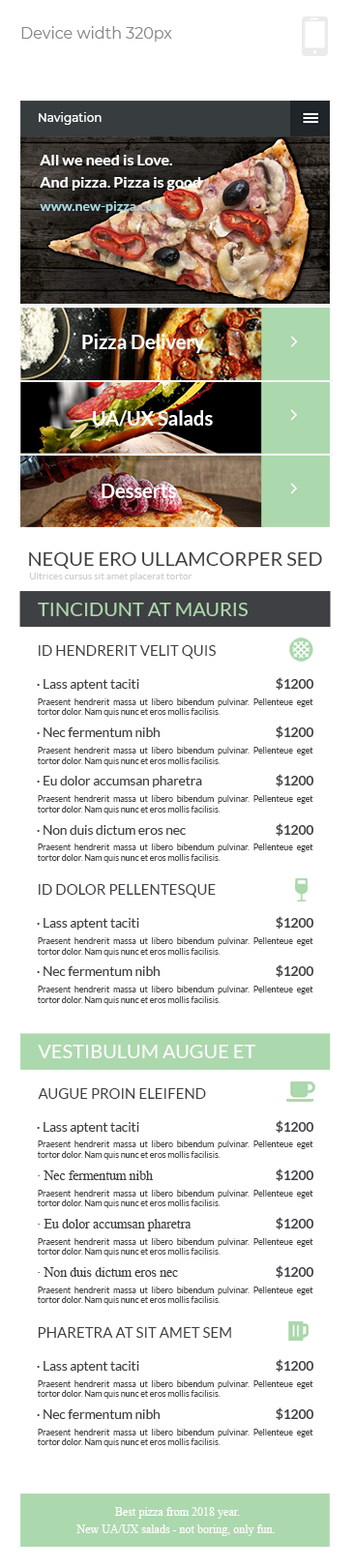
<style>
.page{position:relative;width:354px;height:1568px;background:#ffffff}
.page>*{position:absolute;margin:0}
.t1{font:15.5px "Montserrat-Regular";color:#878787}
.t2{font:11.6px "Montserrat-Medium";color:#ffffff}
.t3{font:15.5px/19.3px "Lato-Bold";color:#ffffff}
.t4{font:13.5px "Lato-Bold";color:#a6d6e0}
.t5{font:19.3px "Lato-Bold";color:#ffffff}
.t6{font:19.4px "Lato-Regular";color:#3f4043;text-transform:uppercase}
.t7{font:9.7px "Lato-Regular";color:#cbccce}
.t8{font:19.4px "Lato-Regular";color:#acd8ad;text-transform:uppercase}
.t9{font:14.6px "Lato-Regular";color:#3f4043;text-transform:uppercase}
.t10{font:13.1px "Lato-Bold";color:#3f4043}
.t11{font:13.1px "Lato-Regular";color:#3f4043}
.t12{font:8.5px "Lato-Regular";color:#3f4043}
.t13{font:19.4px "Lato-Regular";color:#ffffff;text-transform:uppercase}
.t14{font:13.1px "TimesNewRomanPSMT";color:#3f4043}
.t15{font:11.6px/15.5px "TimesNewRomanPSMT";color:#ffffff}
</style>
<div class="page">
<p class="t1" style="left:21px;top:26px;width:151px;height:16px">Device width 320px</p>
<p class="t2" style="left:39px;top:112px;width:63px;height:13px">Navigation</p>
<p class="t3" style="left:40px;top:155px;width:161px;height:36px">All we need is Love.<br>And pizza. Pizza is good</p>
<p class="t4" style="left:40px;top:201px;width:125px;height:12px">www.new-pizza.com</p>
<p class="t5" style="left:82px;top:334px;width:123px;height:19px">Pizza Delivery</p>
<p class="t5" style="left:93px;top:410px;width:120px;height:17px">UA/UX Salads</p>
<p class="t5" style="left:102px;top:484px;width:74px;height:14px">Desserts</p>
<p class="t6" style="left:29px;top:552px;width:293px;height:17px">neque ero ullamcorper sed</p>
<p class="t7" style="left:29px;top:573px;width:163px;height:8px">Ultrices cursus sit amet placerat tortor</p>
<p class="t8" style="left:38px;top:603px;width:210px;height:13px">tincidunt at Mauris</p>
<p class="t9" style="left:39px;top:645px;width:177px;height:14px">id hendrerit velit quis</p>
<p class="t10" style="left:276px;top:677px;width:38px;height:13px">$1200</p>
<p class="t11" style="left:37px;top:679px;width:102px;height:12px">· Lass aptent taciti</p>
<p class="t12" style="left:37px;top:698px;width:276px;height:19px;text-align:justify">Praesent hendrerit massa ut libero bibendum pulvinar. Pellenteue eget tortor dolor. Nam quis nunc et eros mollis facilisis.</p>
<p class="t10" style="left:276px;top:725px;width:38px;height:13px">$1200</p>
<p class="t11" style="left:37px;top:727px;width:123px;height:10px">· Nec fermentum nibh</p>
<p class="t12" style="left:37px;top:747px;width:276px;height:19px;text-align:justify">Praesent hendrerit massa ut libero bibendum pulvinar. Pellenteue eget tortor dolor. Nam quis nunc et eros mollis facilisis.</p>
<p class="t10" style="left:276px;top:774px;width:38px;height:12px">$1200</p>
<p class="t11" style="left:37px;top:776px;width:165px;height:11px">· Eu dolor accumsan pharetra</p>
<p class="t12" style="left:37px;top:795px;width:276px;height:19px;text-align:justify">Praesent hendrerit massa ut libero bibendum pulvinar. Pellenteue eget tortor dolor. Nam quis nunc et eros mollis facilisis.</p>
<p class="t11" style="left:37px;top:825px;width:149px;height:10px">· Non duis dictum eros nec</p>
<p class="t10" style="left:276px;top:823px;width:38px;height:13px">$1200</p>
<p class="t12" style="left:37px;top:843px;width:276px;height:20px;text-align:justify">Praesent hendrerit massa ut libero bibendum pulvinar. Pellenteue eget tortor dolor. Nam quis nunc et eros mollis facilisis.</p>
<p class="t9" style="left:39px;top:884px;width:177px;height:14px">id dolor Pellentesque</p>
<p class="t11" style="left:37px;top:918px;width:102px;height:12px">· Lass aptent taciti</p>
<p class="t10" style="left:276px;top:916px;width:38px;height:13px">$1200</p>
<p class="t12" style="left:37px;top:937px;width:276px;height:20px;text-align:justify">Praesent hendrerit massa ut libero bibendum pulvinar. Pellenteue eget tortor dolor. Nam quis nunc et eros mollis facilisis.</p>
<p class="t10" style="left:276px;top:964px;width:38px;height:13px">$1200</p>
<p class="t11" style="left:37px;top:966px;width:123px;height:10px">· Nec fermentum nibh</p>
<p class="t12" style="left:37px;top:986px;width:276px;height:19px;text-align:justify">Praesent hendrerit massa ut libero bibendum pulvinar. Pellenteue eget tortor dolor. Nam quis nunc et eros mollis facilisis.</p>
<p class="t13" style="left:38px;top:1045px;width:218px;height:13px">vestibulum augue et</p>
<p class="t9" style="left:38px;top:1088px;width:168px;height:11px">augue Proin eleifend</p>
<p class="t10" style="left:276px;top:1120px;width:38px;height:13px">$1200</p>
<p class="t11" style="left:37px;top:1122px;width:102px;height:12px">· Lass aptent taciti</p>
<p class="t12" style="left:37px;top:1140px;width:276px;height:20px;text-align:justify">Praesent hendrerit massa ut libero bibendum pulvinar. Pellenteue eget tortor dolor. Nam quis nunc et eros mollis facilisis.</p>
<p class="t10" style="left:276px;top:1169px;width:38px;height:12px">$1200</p>
<p class="t14" style="left:38px;top:1170px;width:115px;height:10px">· Nec fermentum nibh</p>
<p class="t12" style="left:37px;top:1190px;width:276px;height:18px;text-align:justify">Praesent hendrerit massa ut libero bibendum pulvinar. Pellenteue eget tortor dolor. Nam quis nunc et eros mollis facilisis.</p>
<p class="t10" style="left:276px;top:1217px;width:38px;height:12px">$1200</p>
<p class="t14" style="left:38px;top:1219px;width:154px;height:12px">· Eu dolor accumsan pharetra</p>
<p class="t12" style="left:37px;top:1238px;width:276px;height:19px;text-align:justify">Praesent hendrerit massa ut libero bibendum pulvinar. Pellenteue eget tortor dolor. Nam quis nunc et eros mollis facilisis.</p>
<p class="t10" style="left:276px;top:1265px;width:38px;height:13px">$1200</p>
<p class="t14" style="left:38px;top:1267px;width:140px;height:10px">· Non duis dictum eros nec</p>
<p class="t12" style="left:37px;top:1287px;width:276px;height:18px;text-align:justify">Praesent hendrerit massa ut libero bibendum pulvinar. Pellenteue eget tortor dolor. Nam quis nunc et eros mollis facilisis.</p>
<p class="t9" style="left:38px;top:1327px;width:193px;height:11px">pharetra at sit amet sem</p>
<p class="t11" style="left:37px;top:1361px;width:102px;height:12px">· Lass aptent taciti</p>
<p class="t10" style="left:276px;top:1359px;width:38px;height:13px">$1200</p>
<p class="t12" style="left:37px;top:1380px;width:276px;height:19px;text-align:justify">Praesent hendrerit massa ut libero bibendum pulvinar. Pellenteue eget tortor dolor. Nam quis nunc et eros mollis facilisis.</p>
<p class="t11" style="left:37px;top:1409px;width:123px;height:10px">· Nec fermentum nibh</p>
<p class="t10" style="left:276px;top:1407px;width:38px;height:13px">$1200</p>
<p class="t12" style="left:37px;top:1429px;width:276px;height:18px;text-align:justify">Praesent hendrerit massa ut libero bibendum pulvinar. Pellenteue eget tortor dolor. Nam quis nunc et eros mollis facilisis.</p>
<p class="t15" style="left:76px;top:1507px;width:199px;height:29px;text-align:center">Best pizza from 2018 year. <br>New UA/UX salads - not boring, only fun.</p>
</div>
